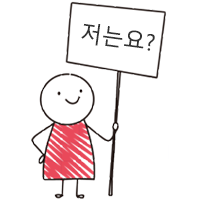
<style>
.page{position:relative;width:200px;height:200px;background:#ffffff}
.page>*{position:absolute;margin:0}
.t1{font:22.7px "MalgunGothic";color:#333333;scale:0.96 1}
</style>
<div class="page">
<p class="t1" style="left:81px;top:23px;width:74px;height:28px;rotate:8deg">저는요?</p>
</div>
